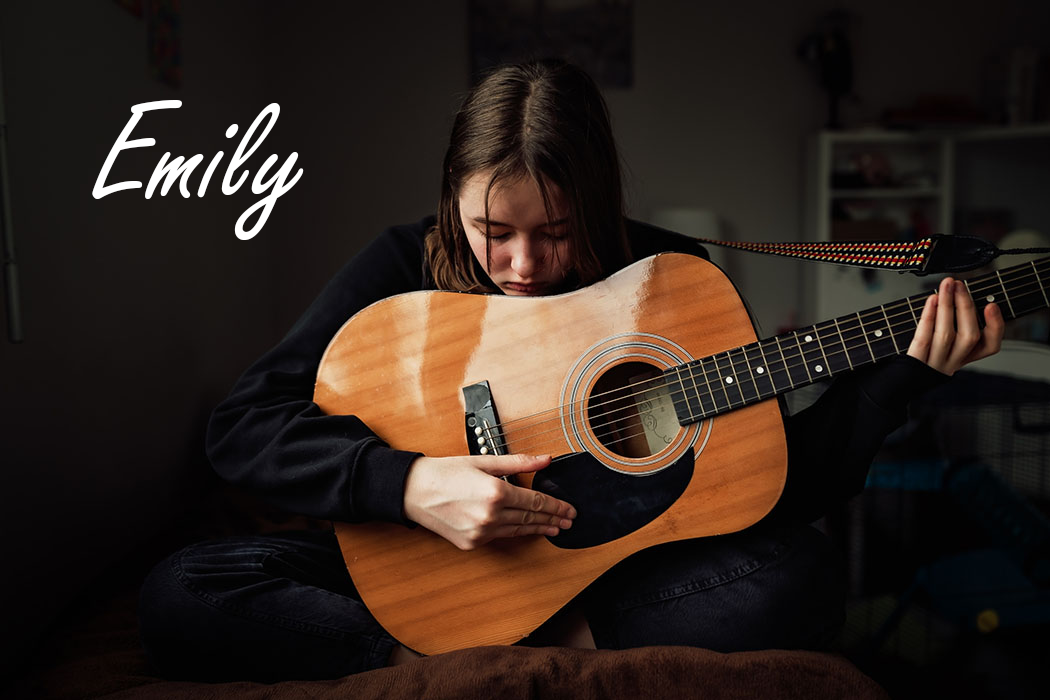
<style>
.page{position:relative;width:1050px;height:700px}
.page>*{position:absolute;margin:0}
.t1{font:150px "FreestyleScript-Regular";color:#ffffff}
</style>
<div class="page">
<p class="t1" style="left:92px;top:100px;width:212px;height:140px">Emily</p>
</div>
